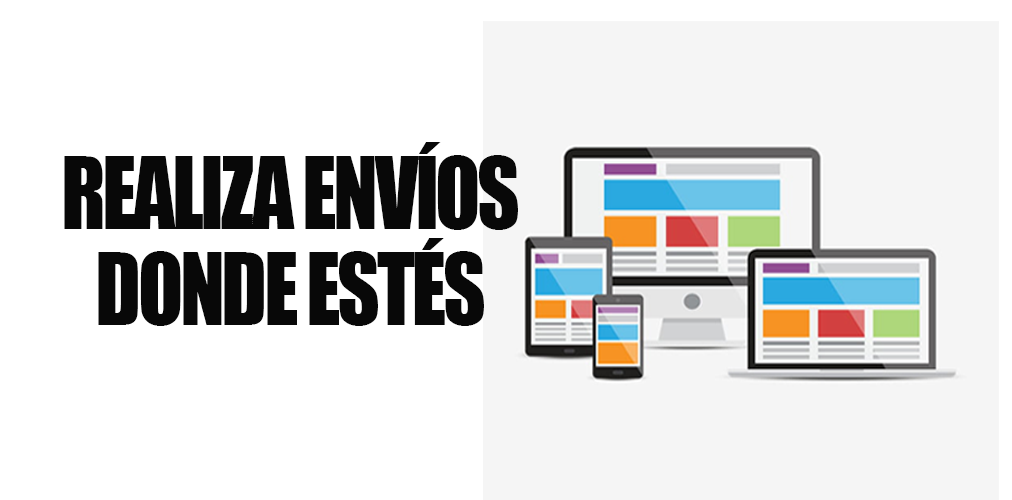
<style>
.page{position:relative;width:1012px;height:500px;background:#ffffff}
.page>*{position:absolute;margin:0}
.t1{font:92.3px/96.2px "Impact";letter-spacing:-0.04em;color:#080808;scale:0.9 1}
</style>
<div class="page">
<p class="t1" style="left:64px;top:142px;width:454px;height:184px;text-align:center">REALIZA ENVÍOS<br>DONDE ESTÉS</p>
</div>
